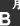
<style>
.page{position:relative;width:20px;height:26px;background:#333333}
.page>*{position:absolute;margin:0}
.t1{font:12px "DFKaiShu-SB-Estd-BF";color:#ffffff;font-weight:bold}
.t2{font:18px "ArialMT";color:#ffffff;font-weight:bold}
</style>
<div class="page">
<p class="t1" style="left:12px;top:0px;width:9px;height:10px">月</p>
<p class="t2" style="left:0px;top:12px;width:11px;height:14px">B</p>
</div>
